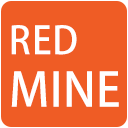
<style>
.page{position:relative;width:128px;height:128px;background:#ef5c25}
.page>*{position:absolute;margin:0}
.t1{font:37.8px "AdobeFanHeitiStd-Bold";letter-spacing:0.005em;color:#ffffff;scale:0.96 1}
.t2{font:46.4px "AdobeFanHeitiStd-Bold";letter-spacing:0.005em;color:#ffffff}
</style>
<div class="page">
<p class="t1" style="left:11px;top:25px;width:66px;height:30px">RED</p>
<p class="t2" style="left:11px;top:71px;width:108px;height:36px">MINE</p>
</div>
